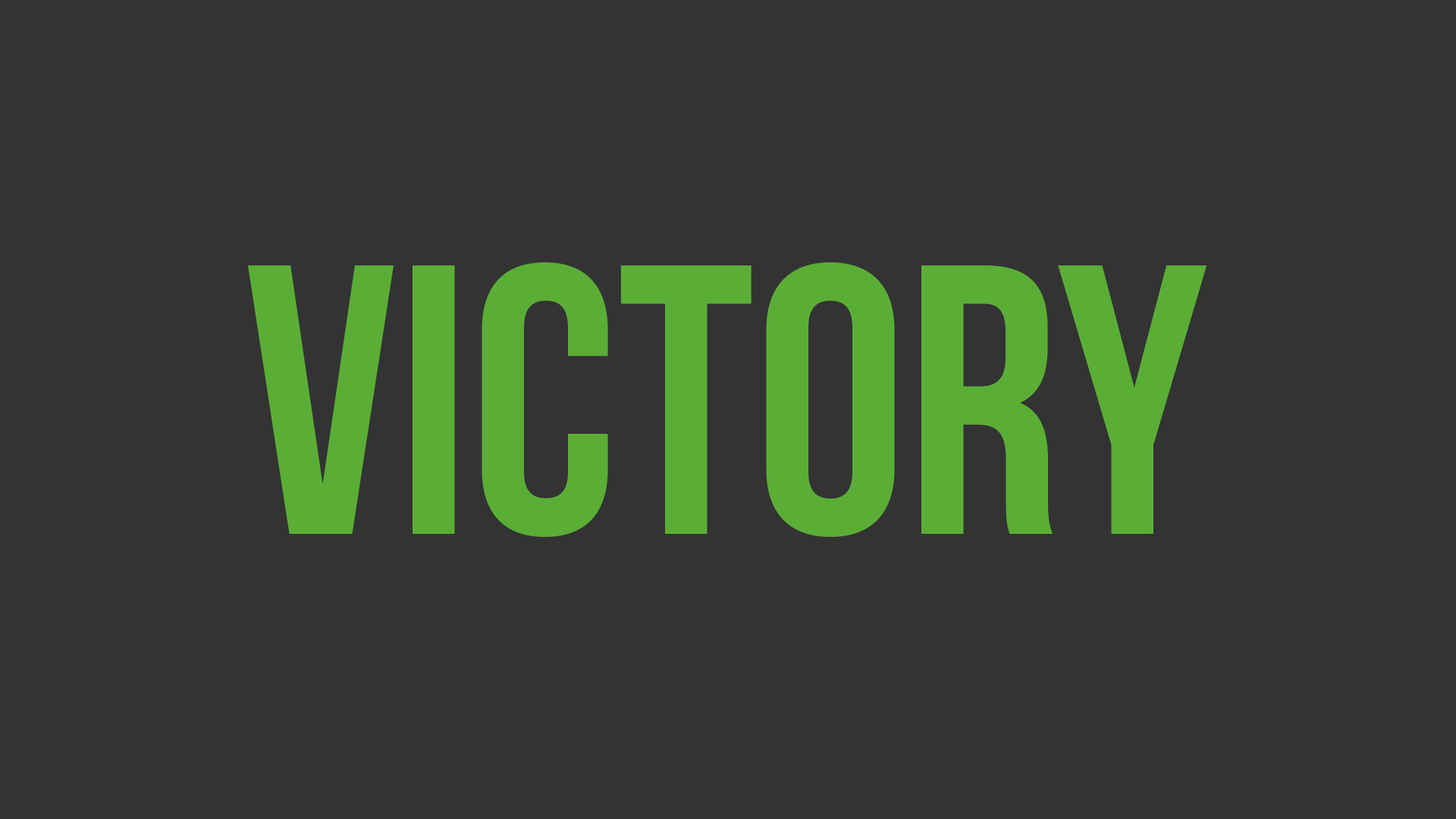
<style>
.page{position:relative;width:1456px;height:819px;background:#333333}
.page>*{position:absolute;margin:0}
.t1{font:383.1px "BebasNeueBold";color:#5aae35}
</style>
<div class="page">
<p class="t1" style="left:248px;top:262px;width:959px;height:275px">Victory</p>
</div>
